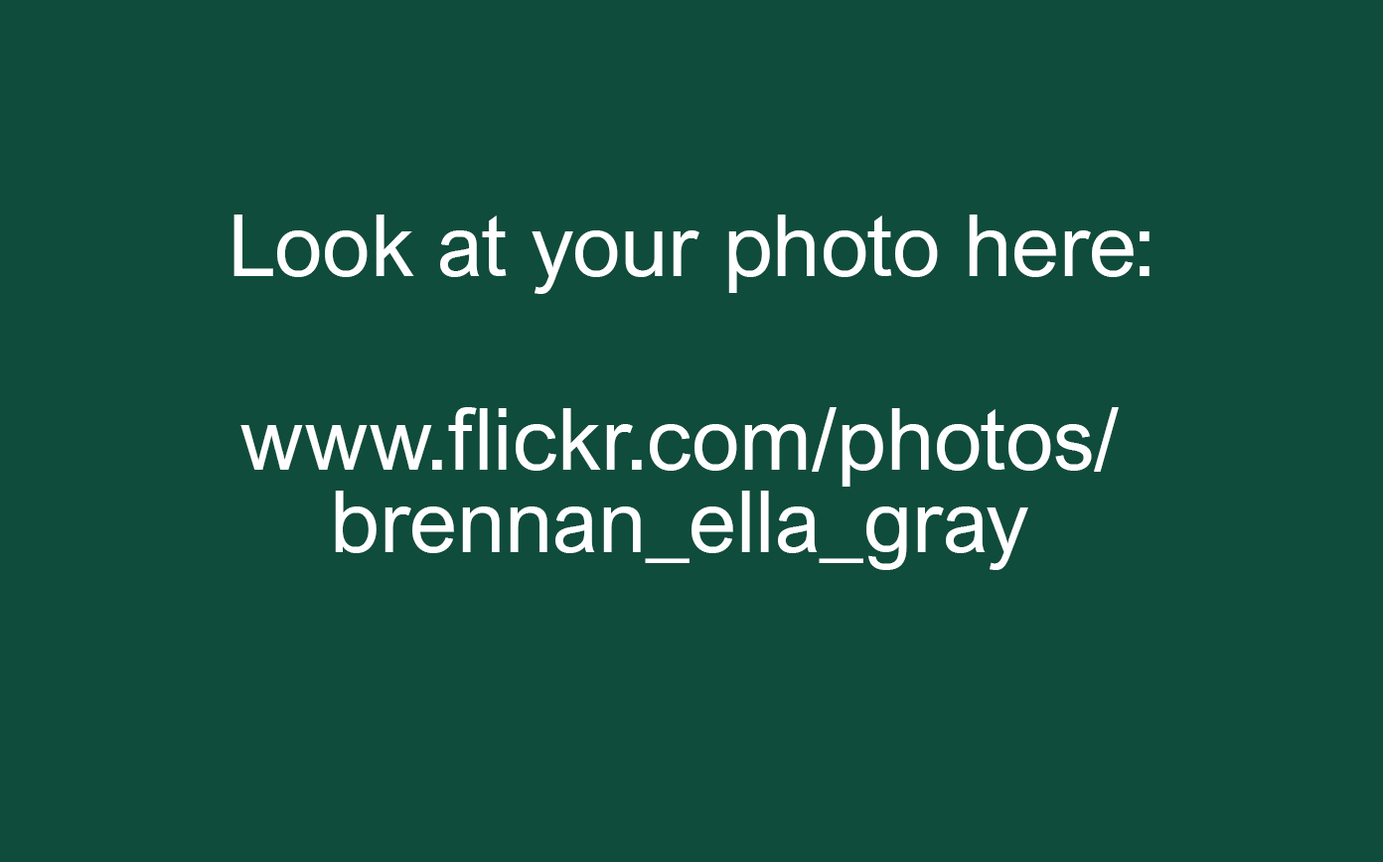
<style>
.page{position:relative;width:1383px;height:862px;background:#0f4c3c}
.page>*{position:absolute;margin:0}
.t1{font:86.2px "ArialNovaW07-Regular";color:#ffffff}
.t2{font:86.2px/82.8px "ArialNovaW07-Regular";color:#ffffff}
</style>
<div class="page">
<p class="t1" style="left:233px;top:215px;width:916px;height:79px">Look at your photo here:</p>
<p class="t1" style="left:240px;top:407px;width:879px;height:163px;text-align:center">www.flickr.com/photos/<br><span class="t2">brennan_ella_gray</span></p>
</div>
